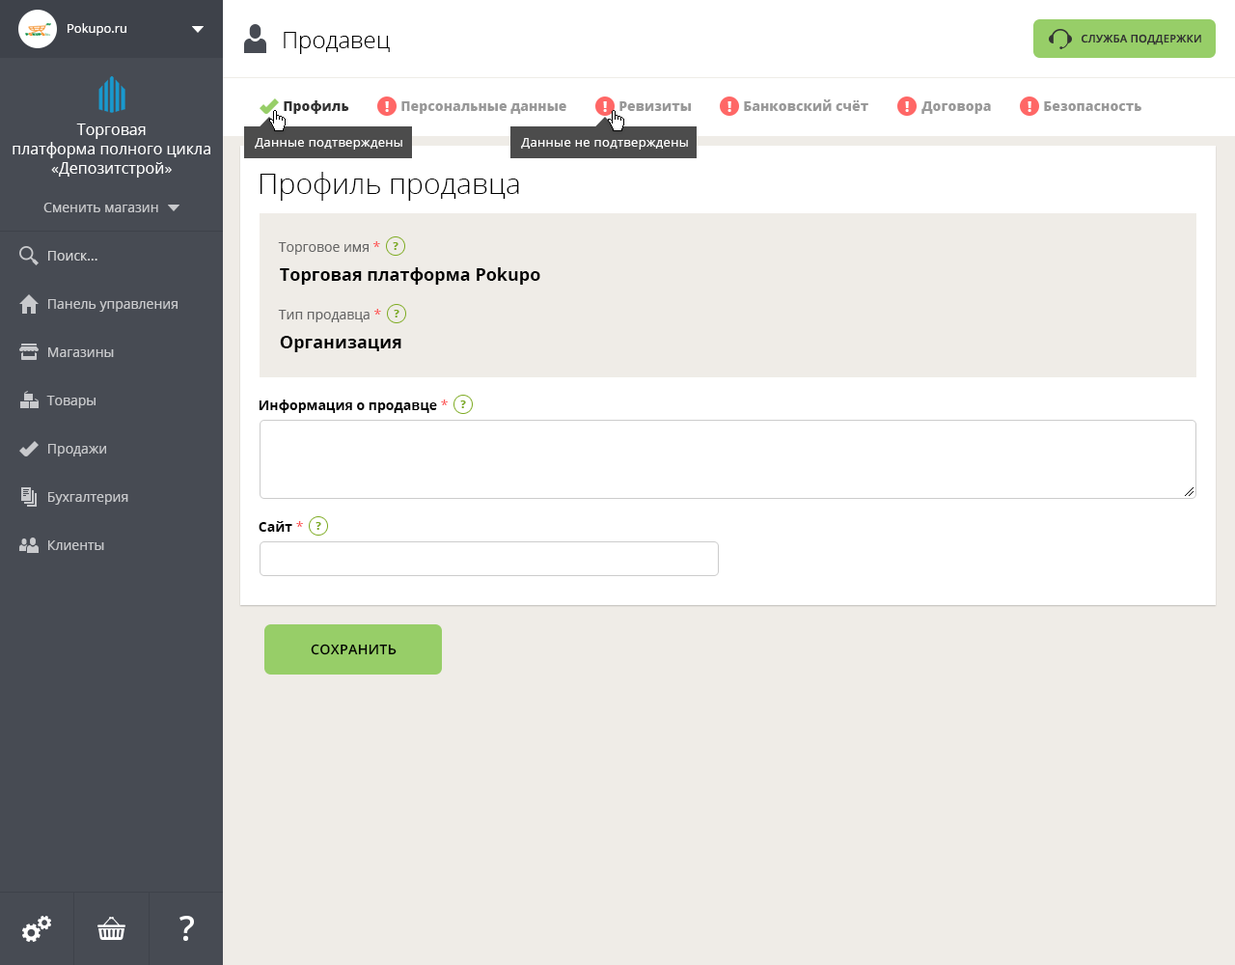
<style>
.page{position:relative;width:1235px;height:965px;background:#efece7}
.page>*{position:absolute;margin:0}
.t1{font:12.5px "OpenSans";color:#ffffff}
.t2{font:23.2px "OpenSans-Light";color:#010101}
.t3{font:10.6px "OpenSans-Semibold";letter-spacing:0.025em;color:#333333;text-transform:uppercase}
.t4{font:13.5px "OpenSans-Extrabold";color:#333333}
.t5{font:13.5px "OpenSans-Extrabold";color:#999999}
.t6{font:15.4px/19.3px "OpenSans";color:#ffffff}
.t7{font:12.5px "OpenSans";letter-spacing:0.025em;color:#ffffff}
.t8{font:29px "OpenSans-Light";color:#000000}
.t9{font:13.5px "OpenSans";color:#c8c9cc}
.t10{font:13.5px "OpenSans";color:#666666}
.t11{font:13.5px "OpenSans";color:#fd5656}
.t12{font:10.6px "OpenSans-Extrabold";color:#7caa1f}
.t13{font:13.5px "OpenSans";color:#d3d4d5}
.t14{font:17.4px "OpenSans-Bold";color:#000000}
.t15{font:13.5px "OpenSans-Bold";color:#000000}
.t16{font:13.5px "OpenSans-Semibold";letter-spacing:0.025em;color:#000000;text-transform:uppercase}
</style>
<div class="page">
<p class="t1" style="left:68px;top:23px;width:58px;height:13px">Pokupo.ru</p>
<p class="t2" style="left:284px;top:32px;width:106px;height:22px">Продавец</p>
<p class="t3" style="left:1082px;top:34px;width:120px;height:11px">Служба поддержки</p>
<p class="t4" style="left:284px;top:100px;width:65px;height:14px">Профиль</p>
<p class="t5" style="left:402px;top:101px;width:165px;height:13px">Персональные данные</p>
<p class="t5" style="left:620px;top:101px;width:71px;height:10px">Ревизиты</p>
<p class="t5" style="left:744px;top:99px;width:125px;height:12px">Банковский счёт</p>
<p class="t5" style="left:922px;top:101px;width:69px;height:13px">Договора</p>
<p class="t5" style="left:1044px;top:101px;width:98px;height:10px">Безопасность</p>
<p class="t6" style="left:13px;top:124px;width:197px;height:54px;text-align:center">Торговая<br>платформа полного цикла<br>«Депозитстрой»</p>
<p class="t7" style="left:255px;top:138px;width:147px;height:12px">Данные подтверждены</p>
<p class="t7" style="left:521px;top:138px;width:167px;height:12px">Данные не подтверждены</p>
<p class="t8" style="left:260px;top:172px;width:259px;height:29px">Профиль продавца</p>
<p class="t9" style="left:43px;top:203px;width:115px;height:9px">Сменить магазин</p>
<p class="t10" style="left:278px;top:241px;width:102px;height:14px">Торговое имя <span class="t11">*</span></p>
<p class="t12" style="left:393px;top:242px;width:6px;height:8px">?</p>
<p class="t13" style="left:48px;top:251px;width:49px;height:10px">Поиск...</p>
<p class="t14" style="left:280px;top:267px;width:261px;height:18px">Торговая платформа Pokupo</p>
<p class="t9" style="left:48px;top:299px;width:130px;height:13px">Панель управления</p>
<p class="t10" style="left:278px;top:309px;width:103px;height:13px">Тип продавца <span class="t11">*</span></p>
<p class="t12" style="left:394px;top:310px;width:6px;height:8px">?</p>
<p class="t14" style="left:280px;top:336px;width:122px;height:16px">Организация</p>
<p class="t9" style="left:48px;top:347px;width:66px;height:10px">Магазины</p>
<p class="t9" style="left:46px;top:396px;width:50px;height:12px">Товары</p>
<p class="t15" style="left:259px;top:400px;width:189px;height:13px">Информация о продавце <span class="t11">*</span></p>
<p class="t12" style="left:460px;top:401px;width:6px;height:7px">?</p>
<p class="t9" style="left:48px;top:444px;width:58px;height:13px">Продажи</p>
<p class="t9" style="left:48px;top:492px;width:80px;height:13px">Бухгалтерия</p>
<p class="t15" style="left:259px;top:521px;width:44px;height:11px">Сайт <span class="t11">*</span></p>
<p class="t12" style="left:316px;top:522px;width:5px;height:8px">?</p>
<p class="t9" style="left:48px;top:541px;width:56px;height:9px">Клиенты</p>
<p class="t16" style="left:311px;top:644px;width:86px;height:11px">Сохранить</p>
</div>
